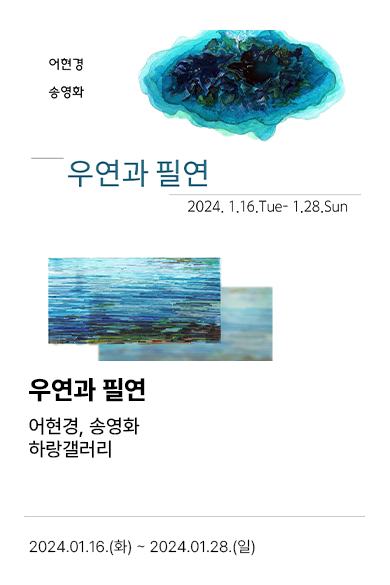
<style>
.page{position:relative;width:390px;height:585px;background:#ffffff}
.page>*{position:absolute;margin:0}
.t1{font:26px "PretendardVariable-ExtraBold";color:#000000}
.t2{font:19.5px "PretendardVariable-Medium";color:#000000}
.t3{font:15.5px "PretendardVariable-Light";color:#000000}
</style>
<div class="page">
<p class="t1" style="left:29px;top:378px;width:116px;height:24px">우연과 필연</p>
<p class="t2" style="left:29px;top:417px;width:111px;height:21px">어현경, 송영화</p>
<p class="t2" style="left:29px;top:440px;width:82px;height:18px">하랑갤러리</p>
<p class="t3" style="left:29px;top:539px;width:226px;height:17px">2024.01.16.(화) ~ 2024.01.28.(일)</p>
</div>
